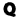
<style>
.page{position:relative;width:19px;height:19px;background:#ffffff}
.page>*{position:absolute;margin:0}
.t1{font:16px "MyriadPro-Regular";letter-spacing:-0.01em;color:#000000}
</style>
<div class="page">
<p class="t1" style="left:4px;top:3px;width:11px;height:13px">Q</p>
</div>
